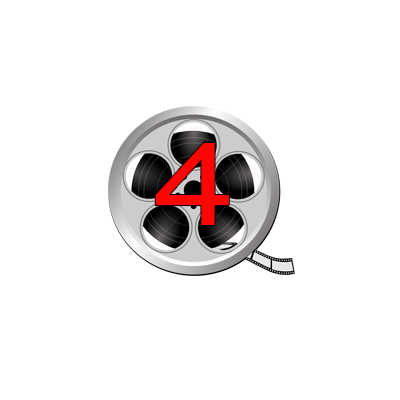
<style>
.page{position:relative;width:400px;height:400px;background:#ffffff}
.page>*{position:absolute;margin:0}
.t1{font:115.8px "ArialMT";color:#fb0505;scale:1.27 1}
</style>
<div class="page">
<p class="t1" style="left:155px;top:143px;width:74px;height:82px">4</p>
</div>
